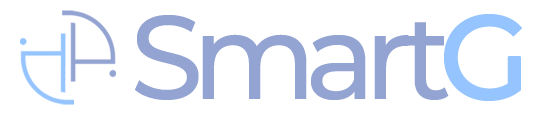
<style>
.page{position:relative;width:540px;height:114px;background:#ffffff}
.page>*{position:absolute;margin:0}
.t1{font:118px "Montserrat-Medium";letter-spacing:-0.1em;color:#93a3d2}
.t2{font:118px "Montserrat-Medium";letter-spacing:-0.1em;color:#95c4ff;font-weight:bold}
</style>
<div class="page">
<p class="t1" style="left:135px;top:14px;width:387px;height:87px">Smart<span class="t2">G</span></p>
</div>
